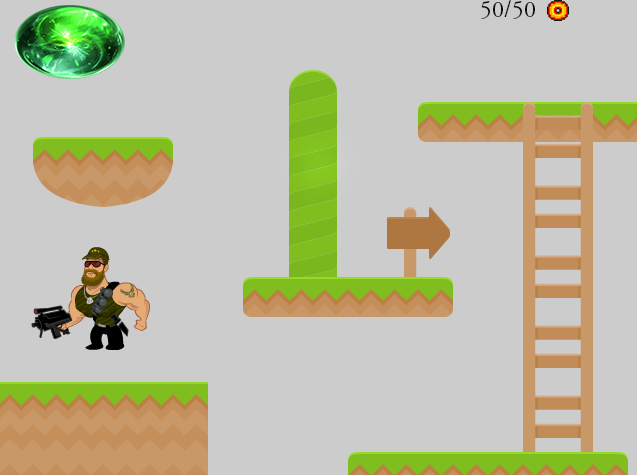
<style>
.page{position:relative;width:637px;height:475px;background:#cccccc}
.page>*{position:absolute;margin:0}
.t1{font:24px "AGaramondPro-Regular";color:#0f0f0e}
</style>
<div class="page">
<p class="t1" style="left:481px;top:0px;width:54px;height:19px">50/50</p>
</div>
